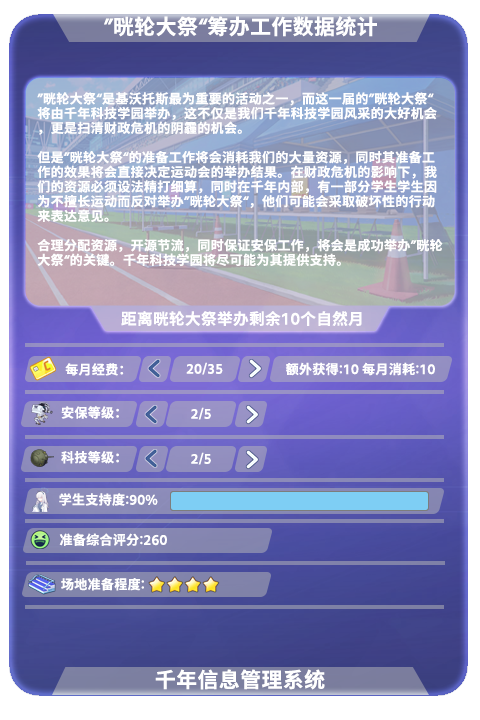
<style>
.page{position:relative;width:480px;height:720px}
.page>*{position:absolute;margin:0}
.t1{font:21.3px "LXGW975GothicSC-600W";color:#ffffff}
.t2{font:13.3px/14.7px "LXGW975GothicSC-600W";color:#ffffff}
.t3{font:13.3px "LXGW975GothicSC-600W";color:#ffffff}
</style>
<div class="page">
<p class="t1" style="left:104px;top:16px;width:273px;height:21px">”晄轮大祭“筹办工作数据统计</p>
<p class="t2" style="left:37px;top:92px;width:406px;height:174px">”晄轮大祭“是基沃托斯最为重要的活动之一，而这一届的”晄轮大祭“<br>将由千年科技学园举办，这不仅是我们千年科技学园风采的大好机会<br>，更是扫清财政危机的阴霾的机会。<br><br>但是”晄轮大祭“的准备工作将会消耗我们的大量资源，同时其准备工<br>作的效果将会直接决定运动会的举办结果。在财政危机的影响下，我<br>们的资源必须设法精打细算，同时在千年内部，有一部分学生学生因<br>为不擅长运动而反对举办”晄轮大祭“，他们可能会采取破坏性的行动<br>来表达意见。<br><br>合理分配资源，开源节流，同时保证安保工作，将会是成功举办”晄轮<br>大祭“的关键。千年科技学园将尽可能为其提供支持。</p>
<p class="t3" style="left:65px;top:363px;width:59px;height:13px">每月经费：</p>
<p class="t3" style="left:186px;top:362px;width:37px;height:13px">20/35</p>
<p class="t3" style="left:285px;top:362px;width:150px;height:14px">额外获得:10 每月消耗:10</p>
<p class="t3" style="left:61px;top:406px;width:58px;height:13px">安保等级：</p>
<p class="t3" style="left:191px;top:407px;width:20px;height:13px">2/5</p>
<p class="t3" style="left:61px;top:451px;width:58px;height:13px">科技等级：</p>
<p class="t3" style="left:191px;top:452px;width:20px;height:13px">2/5</p>
<p class="t3" style="left:59px;top:493px;width:99px;height:13px">学生支持度:90%</p>
<p class="t3" style="left:59px;top:533px;width:108px;height:13px">准备综合评分:260</p>
<p class="t3" style="left:61px;top:578px;width:83px;height:13px">场地准备程度:</p>
<p class="t1" style="left:155px;top:669px;width:170px;height:21px">千年信息管理系统</p>
</div>
